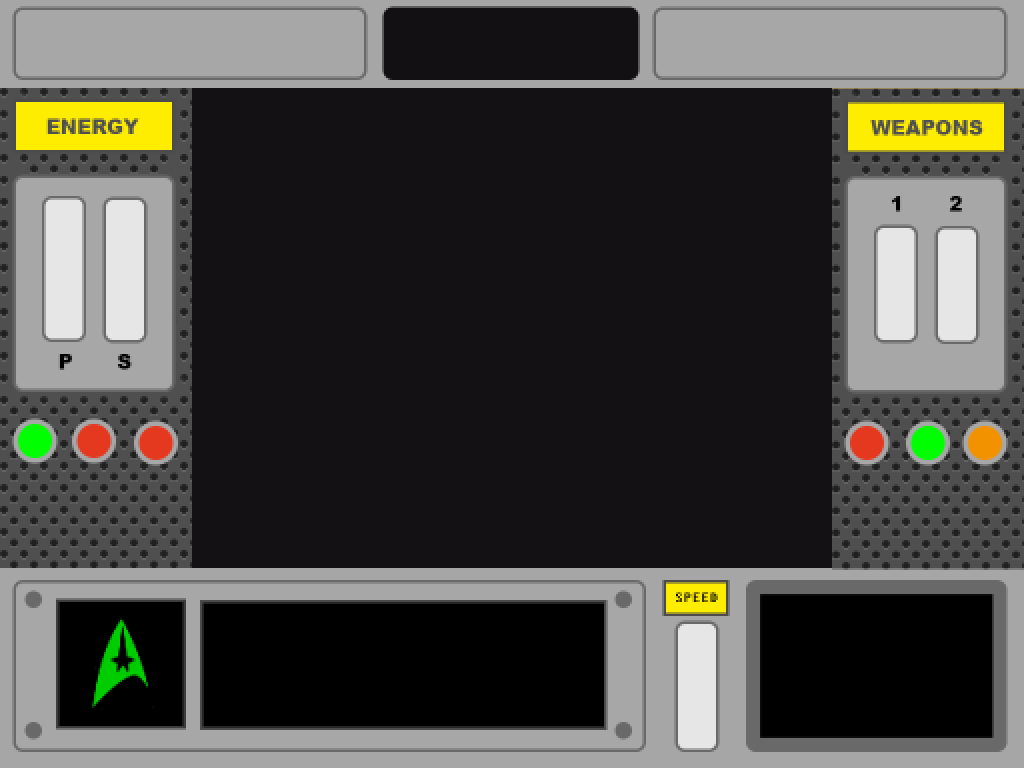
<style>
.page{position:relative;width:1024px;height:768px;background:#131113}
.page>*{position:absolute;margin:0}
.t1{font:20px "Arial-Black";color:#4f4f4f}
.t2{font:20px "Arial-Black";color:#000000}
.t3{font:20px "Arial-Black"}
.t4{font:14px "Fixedsys"}
</style>
<div class="page">
<p class="t1" style="left:47px;top:119px;width:92px;height:15px">ENERGY</p>
<p class="t1" style="left:871px;top:120px;width:112px;height:15px">WEAPONS</p>
<p class="t2" style="left:891px;top:196px;width:10px;height:15px">1</p>
<p class="t3" style="left:949px;top:196px;width:13px;height:15px">2</p>
<p class="t2" style="left:59px;top:354px;width:13px;height:15px">P</p>
<p class="t2" style="left:117px;top:354px;width:14px;height:15px">S</p>
<p class="t4" style="left:676px;top:593px;width:41px;height:9px">SPEED</p>
</div>
